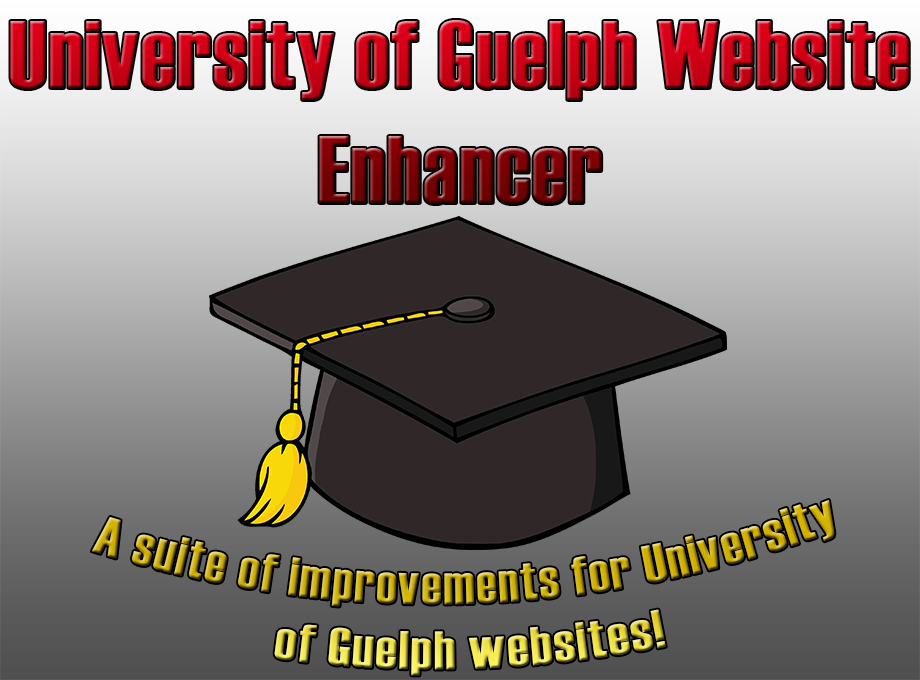
<style>
.page{position:relative;width:920px;height:680px}
.page>*{position:absolute;margin:0}
.t1{font:95.8px "Haettenschweiler";letter-spacing:0.02em}
.t2{font:54.2px "Haettenschweiler";letter-spacing:0.02em}
</style>
<div class="page">
<p class="t1" style="left:10px;top:20px;width:899px;height:184px;text-align:center">University of Guelph Website Enhancer</p>
<p class="t2" style="left:91px;top:499px;width:744px;height:177px;text-align:center;rotate:-2deg">A suite of improvements for University<br>of Guelph websites!</p>
</div>
